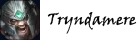
<style>
.page{position:relative;width:140px;height:40px;background:#ffffff}
.page>*{position:absolute;margin:0}
.t1{font:16px "VinerHandITC";color:#000000}
</style>
<div class="page">
<p class="t1" style="left:47px;top:12px;width:90px;height:22px">Tryndamere</p>
</div>
